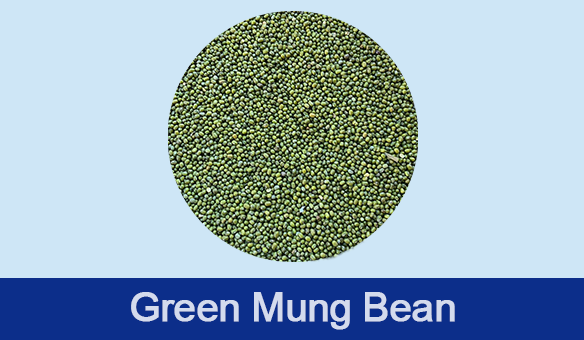
<style>
.page{position:relative;width:584px;height:340px;background:#cee6f6}
.page>*{position:absolute;margin:0}
.t1{font:40.2px "ArialMT";letter-spacing:-0.03em;color:#d4dbed;font-weight:bold}
</style>
<div class="page">
<p class="t1" style="left:131px;top:292px;width:324px;height:38px">Green Mung Bean</p>
</div>
